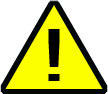
<style>
.page{position:relative;width:108px;height:94px;background:#ffffff}
.page>*{position:absolute;margin:0}
.t1{font:72px "LucidaGrande";color:#000000;scale:1.58 1}
</style>
<div class="page">
<p class="t1" style="left:48px;top:29px;width:12px;height:52px">!</p>
</div>
